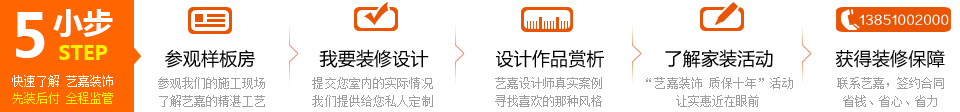
<style>
.page{position:relative;width:960px;height:112px;background:#ffffff}
.page>*{position:absolute;margin:0}
.t1{font:18px "MicrosoftYaHei";letter-spacing:0.01em;color:#000000}
.t2{font:12px/18px "SimSun";letter-spacing:0.01em;color:#9e9e9e}
</style>
<div class="page">
<p class="t1" style="left:165px;top:49px;width:90px;height:19px">参观样板房</p>
<p class="t1" style="left:319px;top:49px;width:110px;height:19px">我要装修设计</p>
<p class="t1" style="left:496px;top:50px;width:108px;height:18px">设计作品赏析</p>
<p class="t1" style="left:665px;top:49px;width:108px;height:19px">了解家装活动</p>
<p class="t1" style="left:835px;top:49px;width:110px;height:19px">获得装修保障</p>
<p class="t2" style="left:158px;top:77px;width:107px;height:30px;text-align:center">参观我们的施工现场<br>了解艺嘉的精湛工艺</p>
<p class="t2" style="left:312px;top:77px;width:121px;height:30px;text-align:center">提交您室内的实际情况<br>我们提供给您私人定制</p>
<p class="t2" style="left:495px;top:77px;width:107px;height:30px;text-align:center">艺嘉设计师真实案例<br>寻找喜欢的那种风格</p>
<p class="t2" style="left:646px;top:77px;width:147px;height:30px;text-align:center">“艺嘉装饰 质保十年”活动<br>让实惠近在眼前</p>
<p class="t2" style="left:837px;top:77px;width:107px;height:30px;text-align:center">联系艺嘉，签约合同<br>省钱、省心、省力</p>
</div>
